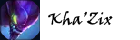
<style>
.page{position:relative;width:140px;height:40px;background:#ffffff}
.page>*{position:absolute;margin:0}
.t1{font:12px "VinerHandITC";color:#000000}
</style>
<div class="page">
<p class="t1" style="left:48px;top:11px;width:65px;height:15px">Kha’Zix</p>
</div>
